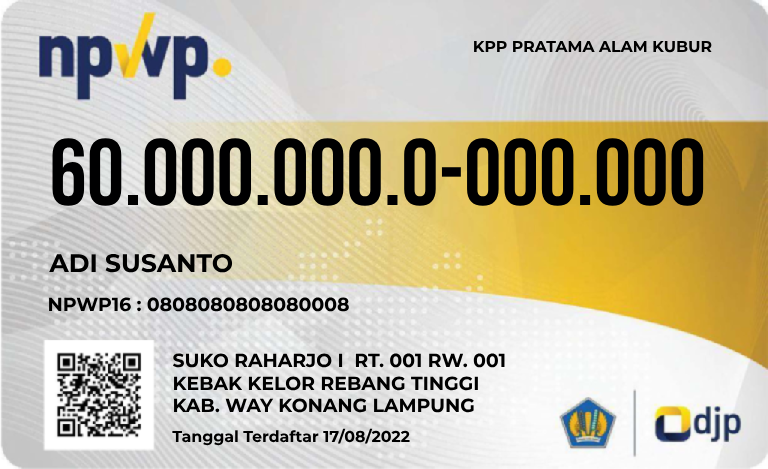
<style>
.page{position:relative;width:768px;height:469px}
.page>*{position:absolute;margin:0}
.t1{font:15.7px "Montserrat-Bold";color:#000000}
.t2{font:94.4px "BebasNeueBold";color:#000001}
.t3{font:25.2px "Montserrat-Bold";color:#000000}
.t4{font:18.9px "Montserrat-Bold";color:#000000}
</style>
<div class="page">
<p class="t1" style="left:474px;top:41px;width:238px;height:12px">KPP PRATAMA ALAM KUBUR</p>
<p class="t2" style="left:52px;top:138px;width:652px;height:68px">60.000.000.0-000.000</p>
<p class="t3" style="left:49px;top:254px;width:184px;height:19px">ADI SUSANTO</p>
<p class="t4" style="left:49px;top:297px;width:300px;height:15px">NPWP16 : 0808080808080008</p>
<p class="t4" style="left:173px;top:353px;width:332px;height:60px">SUKO RAHARJO I  RT. 001 RW. 001 <br>KEBAK KELOR REBANG TINGGI<br>KAB. WAY KONANG LAMPUNG</p>
<p class="t1" style="left:172px;top:428px;width:238px;height:18px">Tanggal Terdaftar 17/08/2022</p>
</div>
